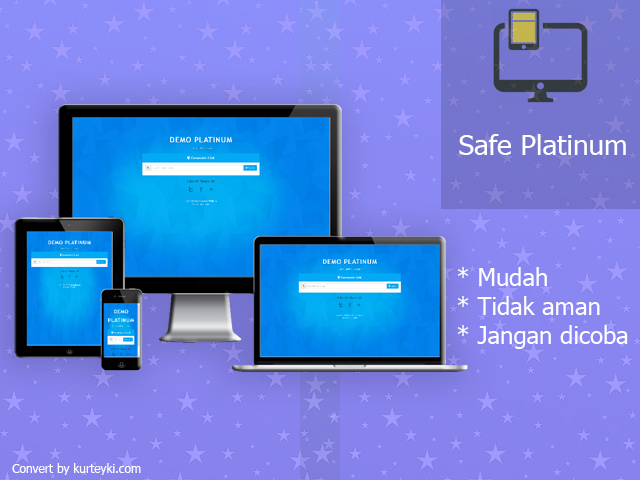
<style>
.page{position:relative;width:640px;height:480px}
.page>*{position:absolute;margin:0}
.t1{font:28px "Tahoma";color:#ffffff}
.t2{font:24px "Tahoma";color:#ffffff}
.t3{font:12px "Tahoma";color:#ffffff}
</style>
<div class="page">
<p class="t1" style="left:459px;top:134px;width:167px;height:21px">Safe Platinum</p>
<p class="t2" style="left:457px;top:267px;width:171px;height:82px">* Mudah<br>* Tidak aman<br>* Jangan dicoba</p>
<p class="t3" style="left:12px;top:463px;width:129px;height:12px">Convert by kurteyki.com</p>
</div>
